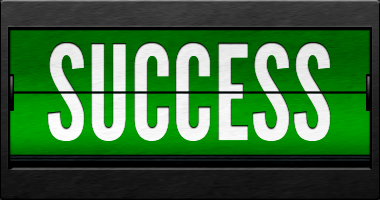
<style>
.page{position:relative;width:380px;height:200px}
.page>*{position:absolute;margin:0}
.t1{font:132px "LeagueGothic";color:#ffffff;scale:0.91 1}
</style>
<div class="page">
<p class="t1" style="left:47px;top:42px;width:284px;height:99px">SUCCESS</p>
</div>
